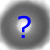
<style>
.page{position:relative;width:50px;height:50px}
.page>*{position:absolute;margin:0}
.t1{font:30px "Verdana";color:#0000ff}
</style>
<div class="page">
<p class="t1" style="left:18px;top:15px;width:13px;height:23px">?</p>
</div>
